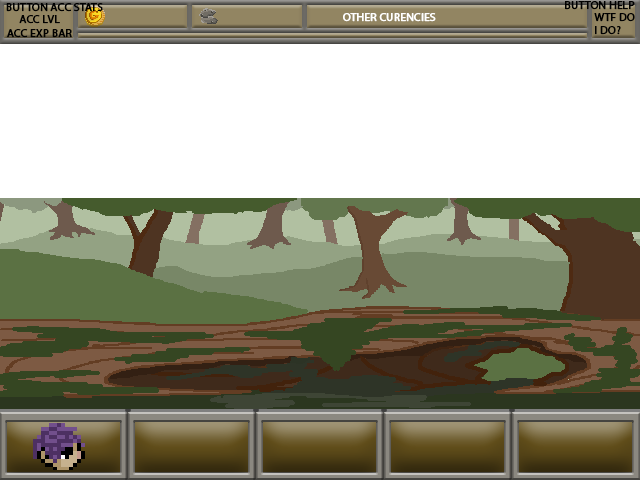
<style>
.page{position:relative;width:640px;height:480px;background:#ffffff}
.page>*{position:absolute;margin:0}
.t1{font:11.3px "MyriadPro-Regular";color:#000000;text-transform:uppercase;font-weight:bold}
.t2{font:11.3px "MyriadPro-Regular";color:#ffffff;text-transform:uppercase;font-weight:bold}
</style>
<div class="page">
<p class="t1" style="left:6px;top:3px;width:97px;height:9px">button acc stats</p>
<p class="t1" style="left:565px;top:1px;width:70px;height:9px">button help</p>
<p class="t1" style="left:19px;top:15px;width:41px;height:9px">Acc Lvl</p>
<p class="t2" style="left:343px;top:13px;width:93px;height:9px">other curencies</p>
<p class="t1" style="left:594px;top:13px;width:41px;height:22px">WTF do <br>I DO?</p>
<p class="t1" style="left:7px;top:29px;width:65px;height:9px">acc exp bar</p>
</div>
